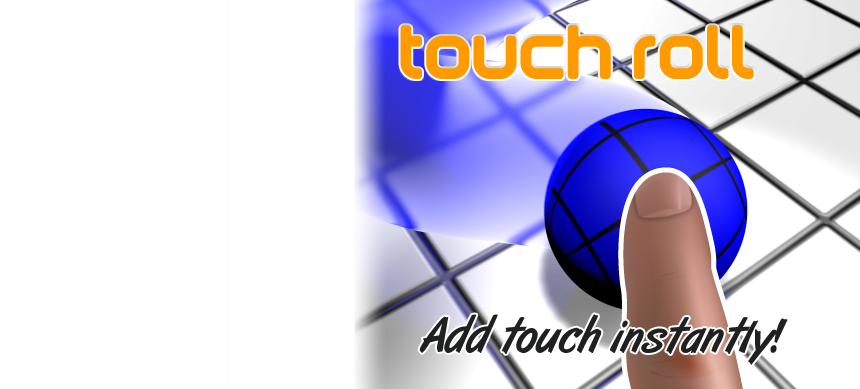
<style>
.page{position:relative;width:860px;height:389px;background:#fefefe}
.page>*{position:absolute;margin:0}
.t1{font:77.3px "paola";color:#ff9c00}
.t2{font:48px "ArtBrush";color:#1f2120}
</style>
<div class="page">
<p class="t1" style="left:400px;top:25px;width:354px;height:54px">Touch Roll</p>
<p class="t2" style="left:419px;top:314px;width:369px;height:51px">Add touch instantly!</p>
</div>
